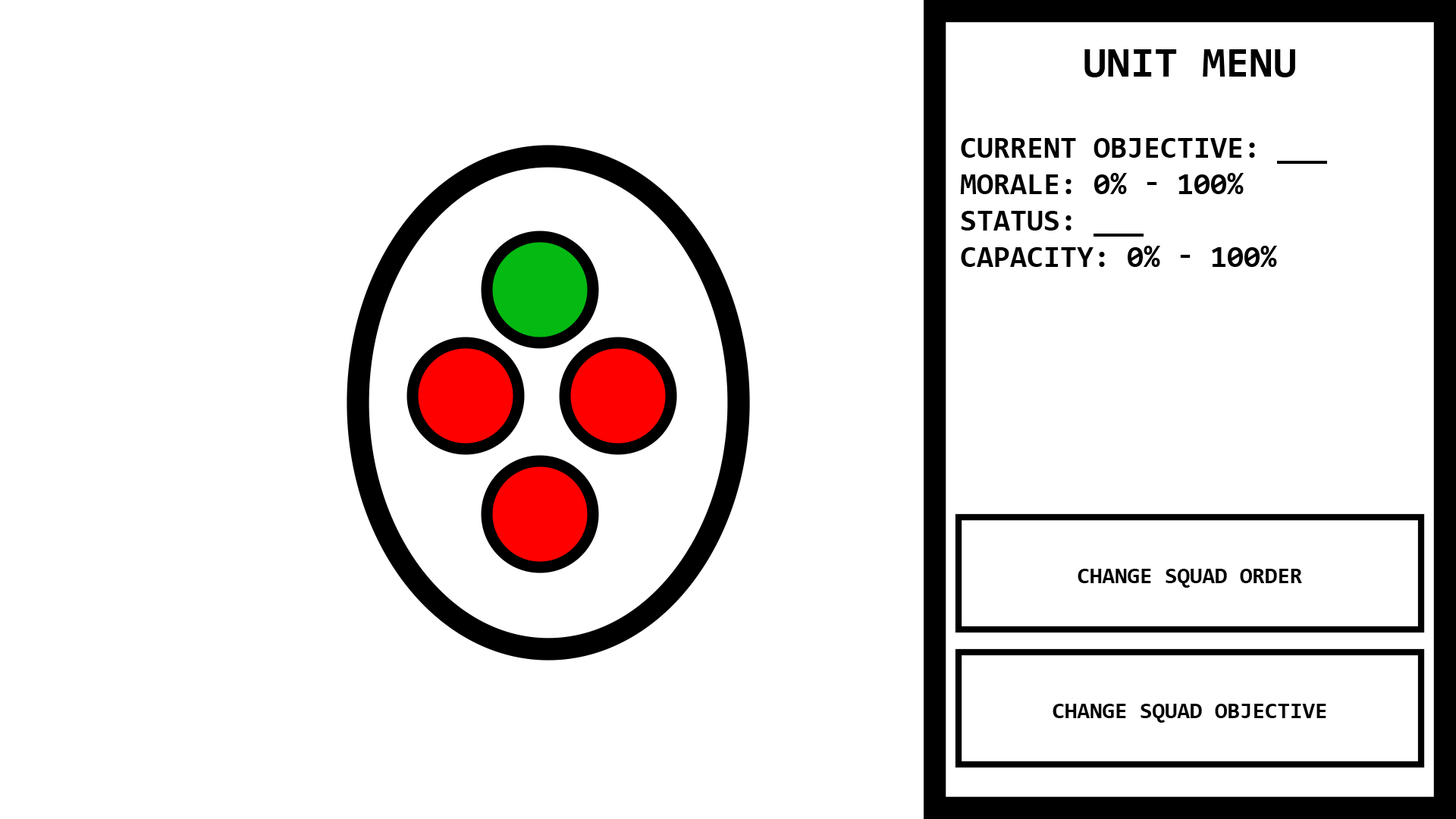
<style>
.page{position:relative;width:1456px;height:819px;background:#ffffff}
.page>*{position:absolute;margin:0}
.t1{font:43.2px "Consolas-Bold";color:#000000;text-transform:uppercase}
.t2{font:30.3px "Consolas-Bold";color:#000000;text-transform:uppercase}
.t3{font:22.7px "Consolas-Bold";color:#000000;text-transform:uppercase}
</style>
<div class="page">
<p class="t1" style="left:1084px;top:49px;width:211px;height:28px">Unit Menu</p>
<p class="t2" style="left:960px;top:138px;width:367px;height:129px">Current Objective: ___<br>Morale: 0% - 100%<br>STatus: ___<br>Capacity: 0% - 100%</p>
<p class="t3" style="left:1078px;top:569px;width:224px;height:19px">Change Squad order</p>
<p class="t3" style="left:1053px;top:704px;width:273px;height:19px">Change Squad Objective</p>
</div>
